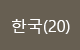
<style>
.page{position:relative;width:80px;height:50px;background:#675f52}
.page>*{position:absolute;margin:0}
.t1{font:16px "MalgunGothic";color:#ffffff}
</style>
<div class="page">
<p class="t1" style="left:12px;top:19px;width:58px;height:15px">한국(20)</p>
</div>
